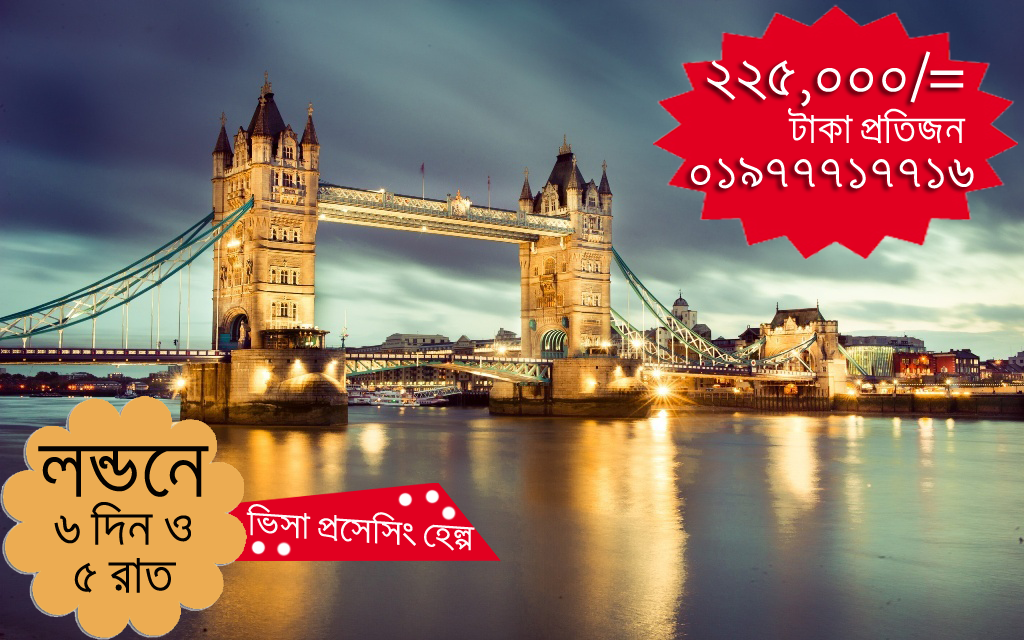
<style>
.page{position:relative;width:1024px;height:640px}
.page>*{position:absolute;margin:0}
.t1{font:48px "SiyamRupaliANSI";color:#fefefd}
.t2{font:32px "SiyamRupaliANSI";color:#fefefd}
.t3{font:40px "SiyamRupaliANSI";color:#ffffff}
.t4{font:40px "SiyamRupaliANSI";color:#040200}
.t5{font:66.7px "SiyamRupaliANSI";color:#040200}
</style>
<div class="page">
<p class="t1" style="left:707px;top:51px;width:257px;height:56px">225,000/=</p>
<p class="t2" style="left:788px;top:108px;width:178px;height:36px">UvKv cÖwZRb</p>
<p class="t3" style="left:691px;top:157px;width:283px;height:32px">01977717716</p>
<p class="t4" style="left:38px;top:446px;width:171px;height:147px;text-align:center"><span class="t5">jÛ‡b<br></span>6 w`b I<br>5 ivZ</p>
</div>
